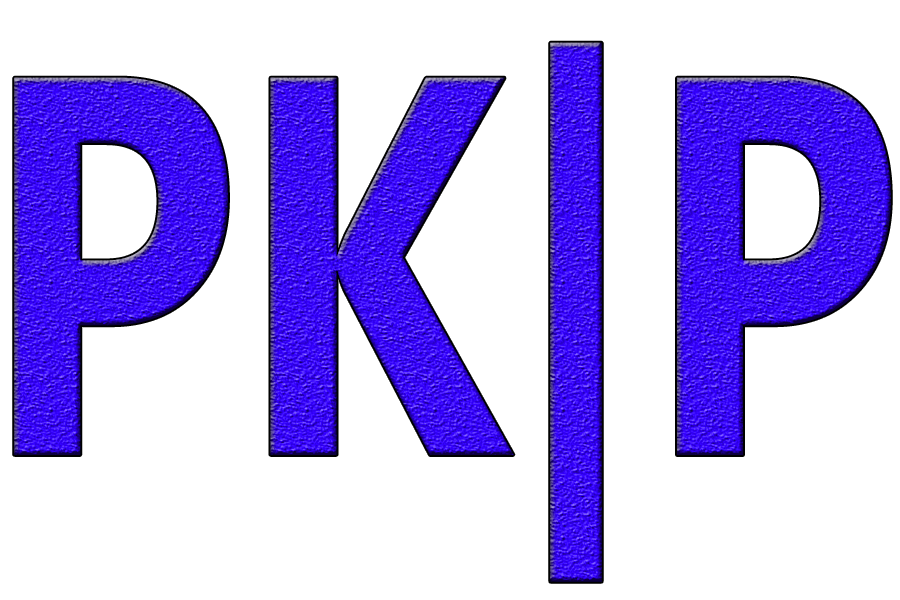
<style>
.page{position:relative;width:900px;height:600px;background:#ffffff}
.page>*{position:absolute;margin:0}
.t1{font:538.7px "SegoeUI-Bold";scale:0.77 1}
</style>
<div class="page">
<p class="t1" style="left:14px;top:42px;width:877px;height:540px">PK|P</p>
</div>
